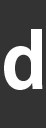
<style>
.page{position:relative;width:46px;height:128px;background:#333333}
.page>*{position:absolute;margin:0}
.t1{font:75px "AdobeGothicStd-Bold";color:#ffffff}
</style>
<div class="page">
<p class="t1" style="left:4px;top:29px;width:39px;height:61px">d</p>
</div>
